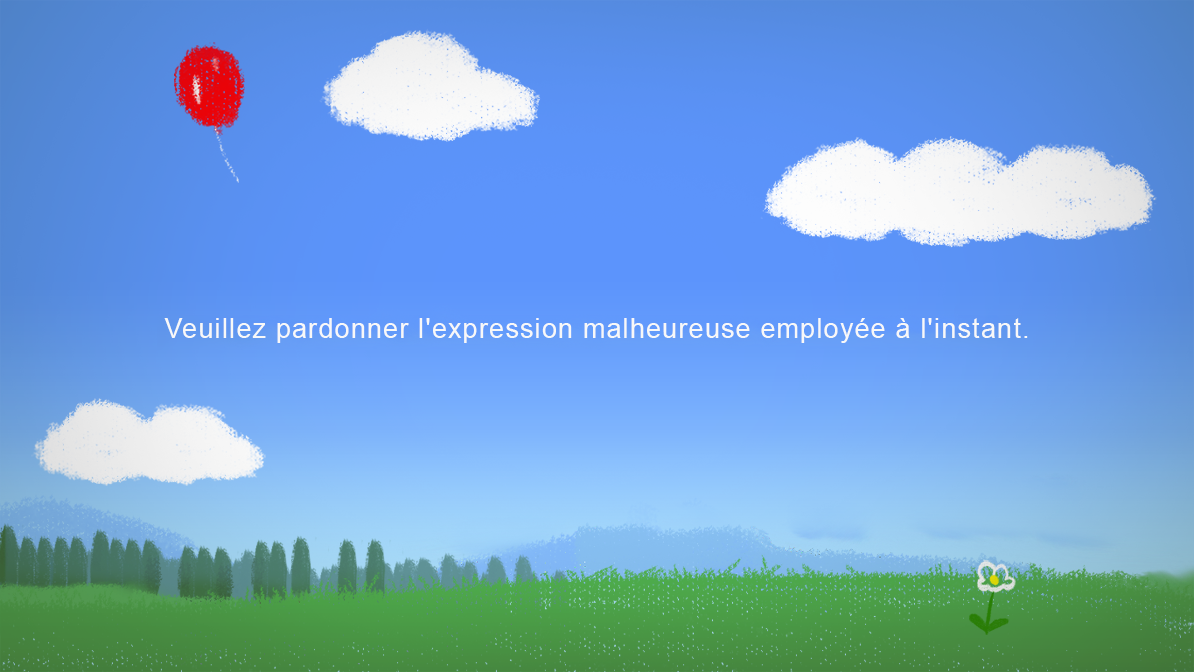
<style>
.page{position:relative;width:1194px;height:672px}
.page>*{position:absolute;margin:0}
.t1{font:26.7px "ArialMT";letter-spacing:0.05em;color:#f8f8f8}
</style>
<div class="page">
<p class="t1" style="left:164px;top:318px;width:864px;height:25px">Veuillez pardonner l'expression malheureuse employée à l'instant.</p>
</div>
